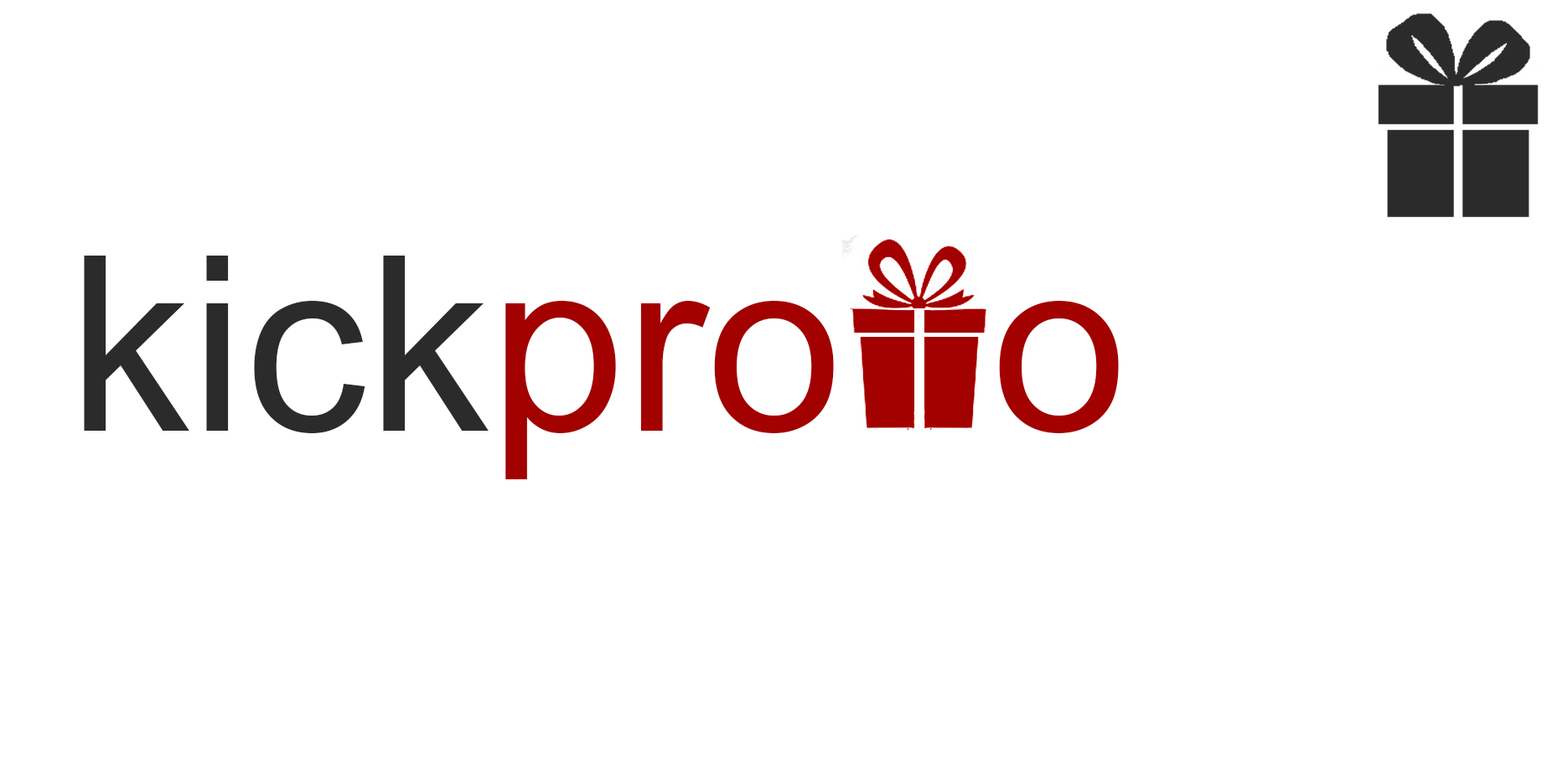
<style>
.page{position:relative;width:1568px;height:760px;background:#ffffff}
.page>*{position:absolute;margin:0}
.t1{font:244.7px "ArialMT";color:#a30000}
.t2{font:244.7px "ArialMT";color:#2b2b2b}
</style>
<div class="page">
<p class="t1" style="left:84px;top:256px;width:1035px;height:223px"><span class="t2">kick</span>pro   o</p>
</div>
